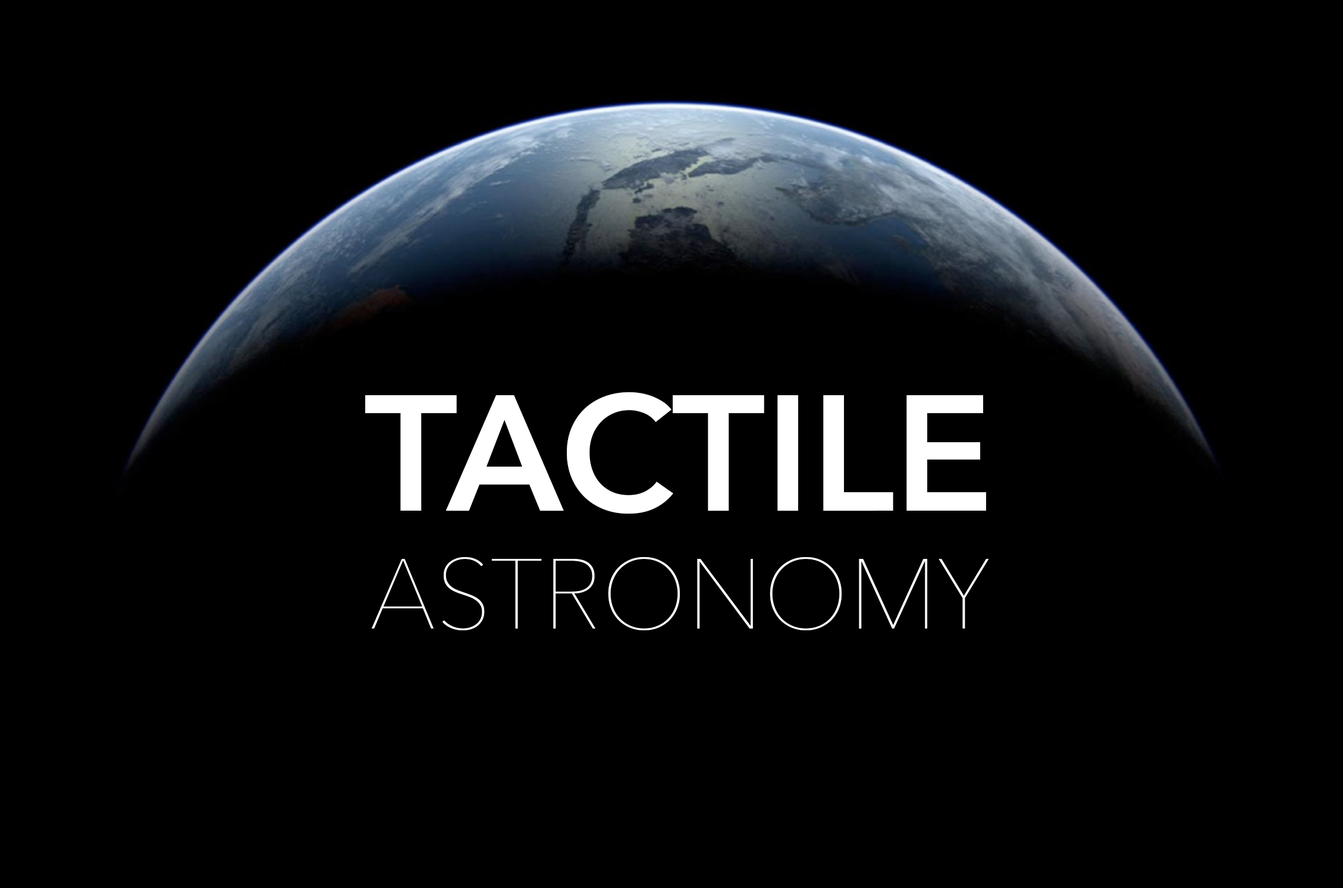
<style>
.page{position:relative;width:1343px;height:888px;background:#000000}
.page>*{position:absolute;margin:0}
.t1{font:98.2px "AvenirNext-UltraLight";color:#ffffff}
.t2{font:163px "AvenirNext-DemiBold";color:#ffffff}
</style>
<div class="page">
<p class="t1" style="left:365px;top:392px;width:624px;height:238px;text-align:center"><span class="t2">TACTILE<br></span>ASTRONOMY</p>
</div>
